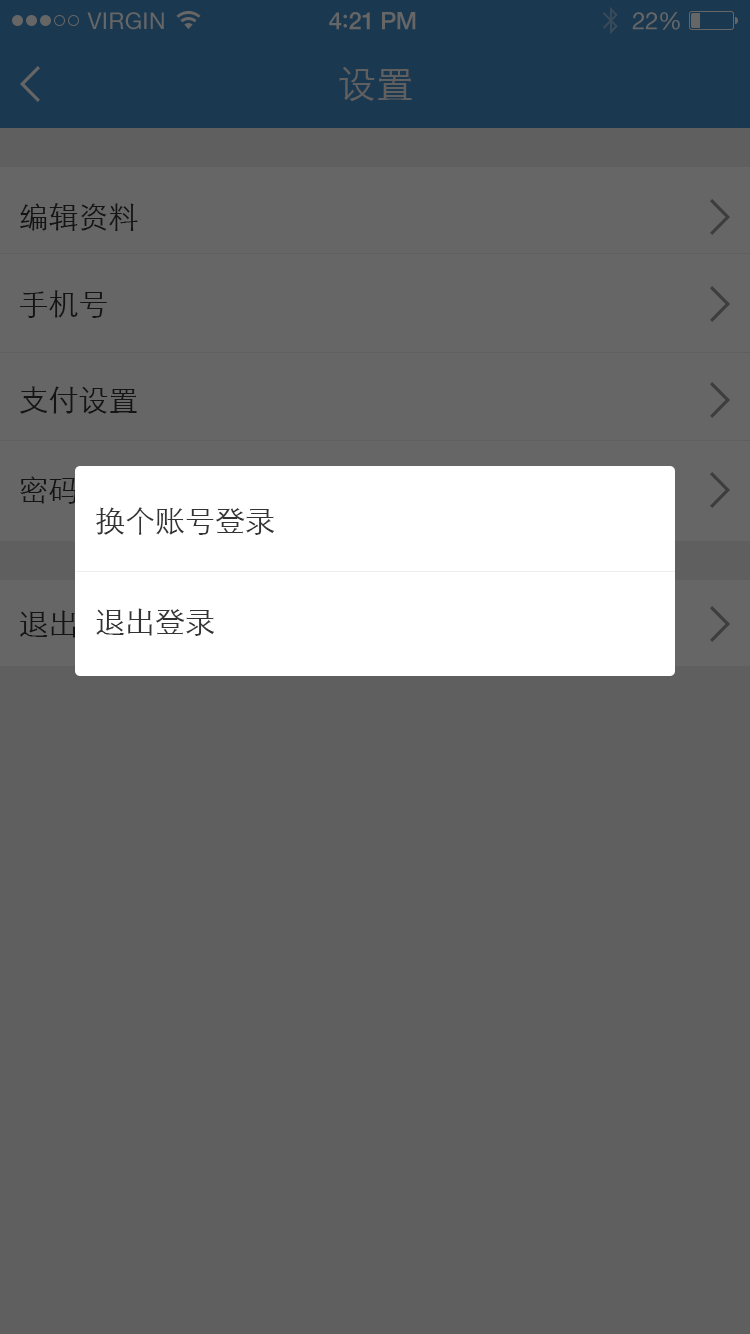
<style>
.page{position:relative;width:750px;height:1334px;background:#5f5f5f}
.page>*{position:absolute;margin:0}
.t1{font:23px "HelveticaNeue";letter-spacing:0.02em;color:#666666}
.t2{font:24px "HelveticaNeue-Medium";letter-spacing:-0.02em;color:#666666}
.t3{font:26px "Avenir-Medium";letter-spacing:-0.02em;color:#666666}
.t4{font:24px "HelveticaNeue";letter-spacing:-0.02em;color:#666666}
.t5{font:38px "STXihei";color:#5f5f5f}
.t6{font:30px "STXihei";color:#141414}
.t7{font:30px "STXihei";color:#333333}
</style>
<div class="page">
<p class="t1" style="left:87px;top:12px;width:77px;height:18px">VIRGIN</p>
<p class="t2" style="left:329px;top:12px;width:87px;height:18px">4<span class="t3">:</span>21 PM</p>
<p class="t4" style="left:632px;top:12px;width:48px;height:18px">22%</p>
<p class="t5" style="left:339px;top:67px;width:73px;height:34px">设置</p>
<p class="t6" style="left:20px;top:203px;width:118px;height:28px">编辑资料</p>
<p class="t6" style="left:20px;top:290px;width:87px;height:28px">手机号</p>
<p class="t6" style="left:19px;top:386px;width:118px;height:28px">支付设置</p>
<p class="t7" style="left:96px;top:507px;width:178px;height:28px">换个账号登录</p>
<p class="t7" style="left:96px;top:608px;width:118px;height:28px">退出登录</p>
</div>
